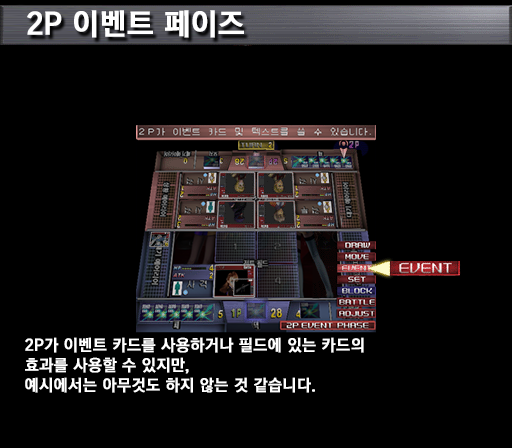
<style>
.page{position:relative;width:512px;height:448px;background:#000000}
.page>*{position:absolute;margin:0}
.t1{font:30px "KoreanGD15-R";color:#ffffff;font-weight:bold}
.t2{font:16px/20px "KoreanGD15-R";color:#ffffff;font-weight:bold}
</style>
<div class="page">
<p class="t1" style="left:27px;top:10px;width:217px;height:28px">2P 이벤트 페이즈</p>
<p class="t2" style="left:25px;top:337px;width:339px;height:56px">2P가 이벤트 카드를 사용하거나 필드에 있는 카드의<br>효과를 사용할 수 있지만,<br>예시에서는 아무것도 하지 않는 것 같습니다.</p>
</div>
